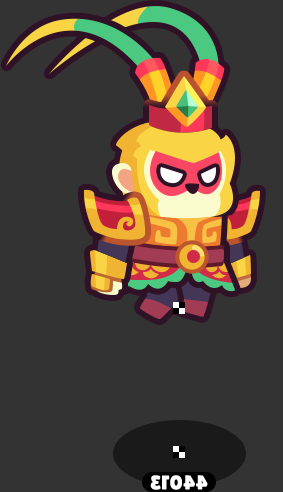
<style>
.page{position:relative;width:283px;height:492px;background:#333333}
.page>*{position:absolute;margin:0}
.t1{font:19.9px "LilitaOne";color:#ffffff;font-weight:bold}
</style>
<div class="page">
<p class="t1" style="left:150px;top:475px;width:58px;height:15px;rotate:180deg">44013</p>
</div>
